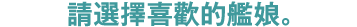
<style>
.page{position:relative;width:357px;height:27px;background:#ffffff}
.page>*{position:absolute;margin:0}
.t1{font:26px "GothicMB101Pr6N-Medium";color:#3f999c;font-weight:bold}
</style>
<div class="page">
<p class="t1" style="left:67px;top:1px;width:223px;height:26px">請選擇喜歡的艦娘。</p>
</div>
